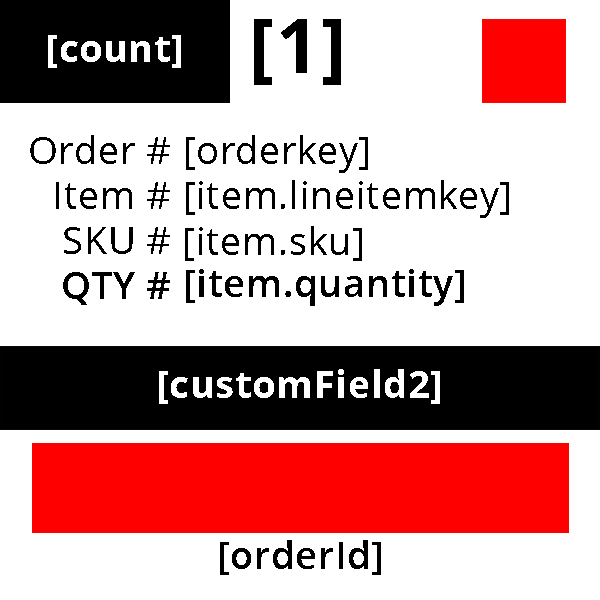
<style>
.page{position:relative;width:600px;height:600px;background:#ffffff}
.page>*{position:absolute;margin:0}
.t1{font:75px "OpenSans-Bold";letter-spacing:0.025em;color:#000000}
.t2{font:37.5px "OpenSans-Bold";letter-spacing:0.025em;color:#ffffff}
.t3{font:37.5px "OpenSans";letter-spacing:0.025em;color:#000000}
.t4{font:37.5px "OpenSans-Semibold";letter-spacing:0.025em;color:#000000}
</style>
<div class="page">
<p class="t1" style="left:254px;top:19px;width:87px;height:66px">[1]</p>
<p class="t2" style="left:48px;top:35px;width:133px;height:33px">[count]</p>
<p class="t3" style="left:30px;top:135px;width:140px;height:170px;text-align:right">Order #<br>Item #<br>SKU #<br><span class="t4">QTY #</span></p>
<p class="t3" style="left:186px;top:135px;width:182px;height:38px">[orderkey]</p>
<p class="t3" style="left:186px;top:180px;width:323px;height:38px">[item.lineitemkey]</p>
<p class="t3" style="left:185px;top:226px;width:177px;height:35px">[item.sku]</p>
<p class="t4" style="left:186px;top:269px;width:278px;height:37px">[item.quantity]</p>
<p class="t2" style="left:159px;top:369px;width:281px;height:35px">[customField2]</p>
<p class="t4" style="left:220px;top:540px;width:161px;height:35px">[orderId]</p>
</div>
